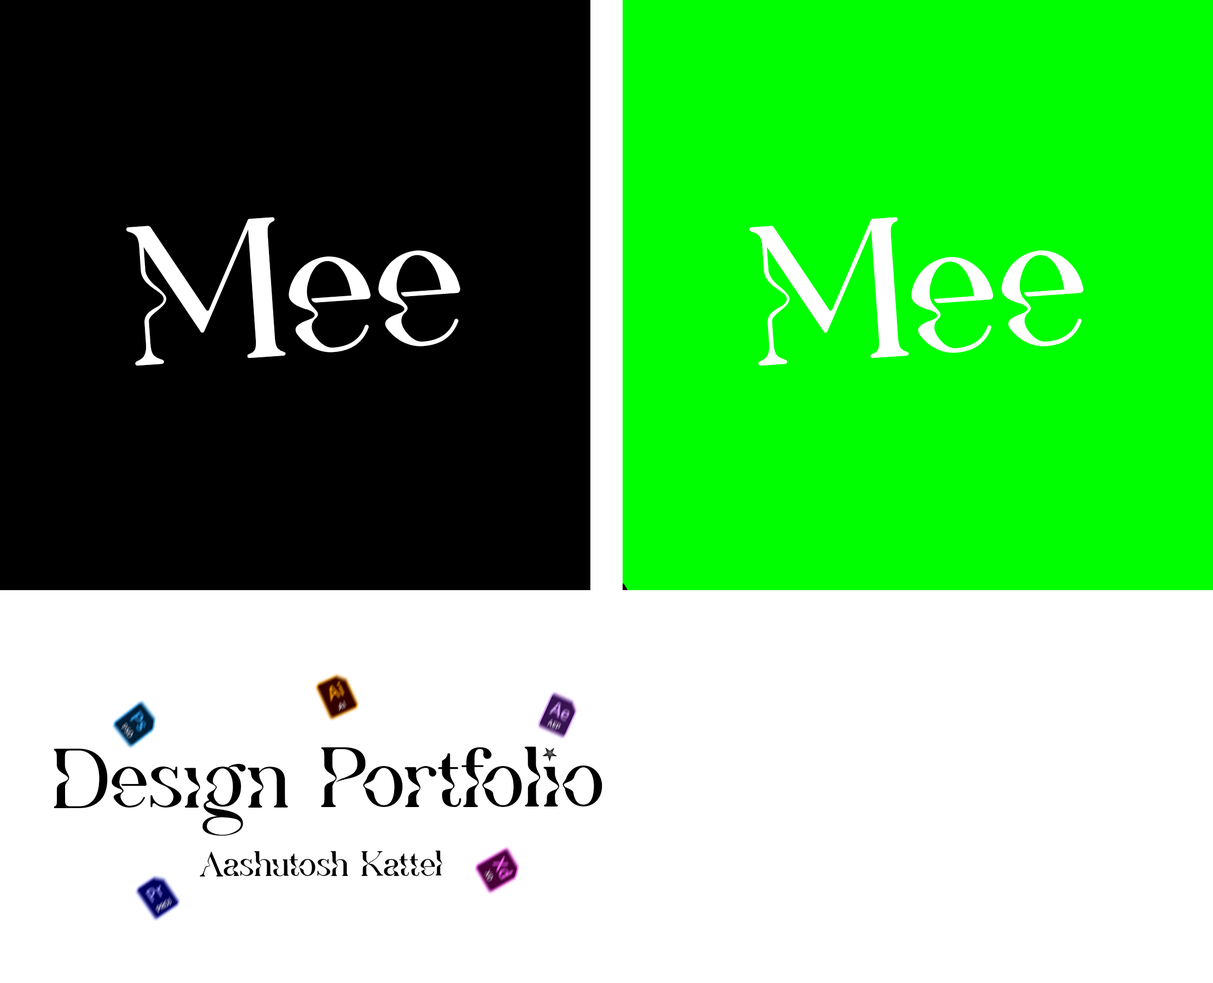
<style>
.page{position:relative;width:1213px;height:983px;background:#ffffff}
.page>*{position:absolute;margin:0}
.t1{font:209.3px "TrailFREE";color:#ffffff}
.t2{font:89.7px "TrailFREE";color:#000000}
.t3{font:37px "TrailFREE";color:#000000}
</style>
<div class="page">
<p class="t1" style="left:126px;top:217px;width:334px;height:149px;rotate:-4deg">Mee</p>
<p class="t1" style="left:749px;top:217px;width:334px;height:149px;rotate:-4deg">Mee</p>
<p class="t2" style="left:54px;top:747px;width:548px;height:89px">Design Portfolio</p>
<p class="t3" style="left:199px;top:850px;width:243px;height:27px">Aashutosh Kattel</p>
</div>
